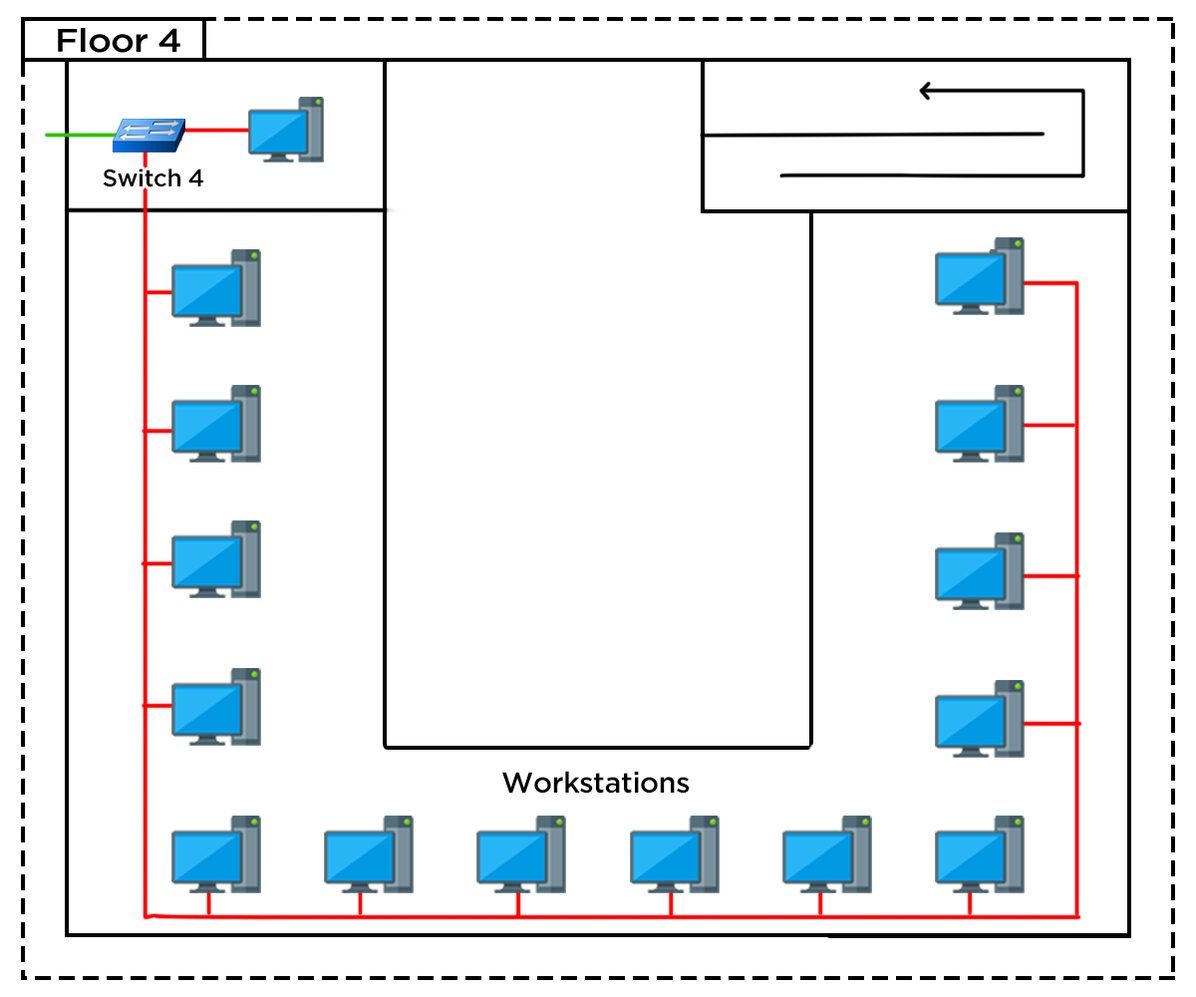
<style>
.page{position:relative;width:1196px;height:997px;background:#ffffff}
.page>*{position:absolute;margin:0}
.t1{font:32.8px "iCielGotham-Medium";letter-spacing:-0.02em;color:#000000;scale:1.1 1}
.t2{font:24.2px "iCielGotham-Medium";letter-spacing:-0.02em;color:#000000}
.t3{font:28.9px "iCielGotham-Medium";letter-spacing:-0.02em;color:#000000}
</style>
<div class="page">
<p class="t1" style="left:58px;top:28px;width:122px;height:25px">Floor 4</p>
<p class="t2" style="left:103px;top:168px;width:100px;height:19px">Switch 4</p>
<p class="t3" style="left:502px;top:771px;width:188px;height:22px">Workstations</p>
</div>
